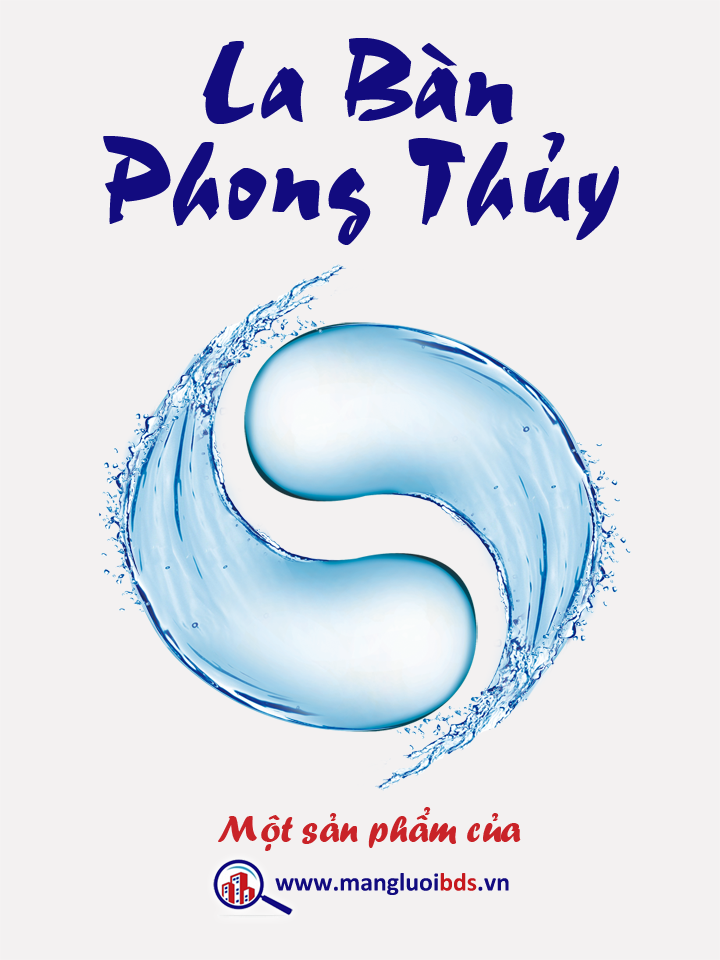
<style>
.page{position:relative;width:720px;height:960px;background:#f3f1f1}
.page>*{position:absolute;margin:0}
.t1{font:123.6px/95.8px "UVNThangVu";color:#120b7f}
.t2{font:37.1px "UVNDzungDakao";color:#c92328}
.t3{font:25.8px "Calibri-Bold";color:#120b7f}
.t4{font:25.8px "Calibri-Bold";color:#c6181d}
</style>
<div class="page">
<p class="t1" style="left:103px;top:38px;width:516px;height:207px;text-align:center">La Bàn<br>Phong Thủy</p>
<p class="t2" style="left:218px;top:807px;width:303px;height:44px">Một sản phẩm của</p>
<p class="t3" style="left:275px;top:873px;width:234px;height:22px">www.mangluoi<span class="t4">bds</span>.vn</p>
</div>
